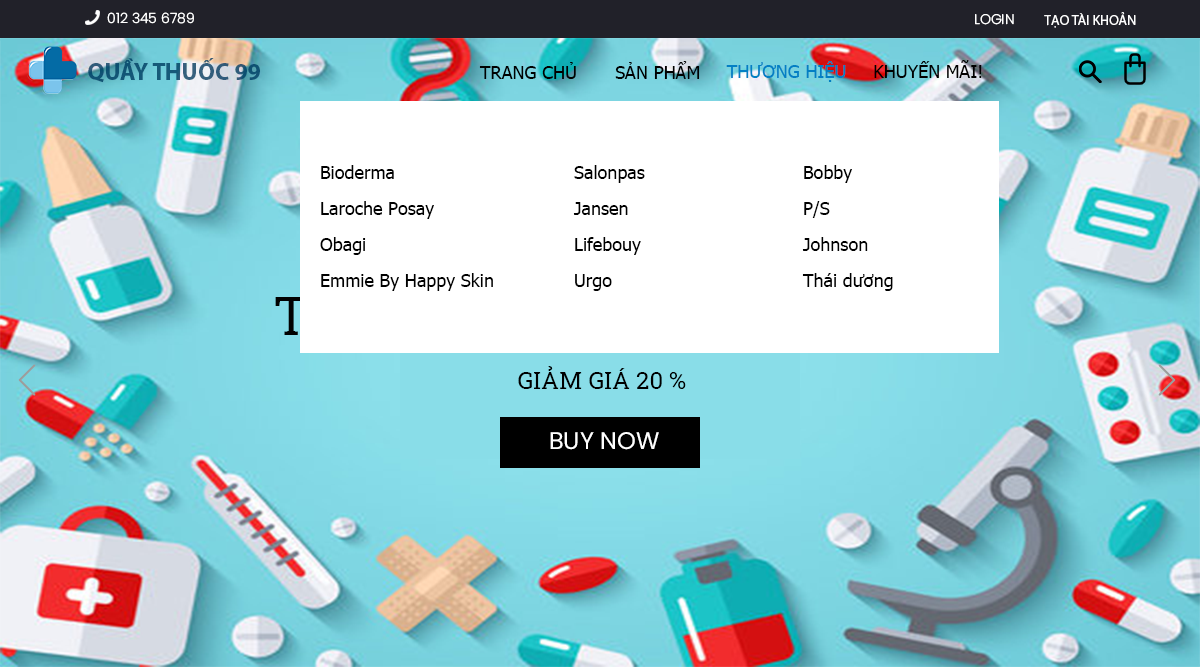
<style>
.page{position:relative;width:1200px;height:667px;background:#ffffff}
.page>*{position:absolute;margin:0}
.t1{font:14px "Poppins-Light";color:#ffffff}
.t2{font:14px "MyriadPro-Regular";color:#ffffff}
.t3{font:24px "MyriadPro-Bold"}
.t4{font:18px "Tahoma";color:#000000}
.t5{font:18px "Tahoma";color:#037fc4}
.t6{font:18px/36px "Tahoma";color:#000000}
.t7{font:18px/36px "RobotoSlab-Regular";color:#000000;font-weight:bold}
.t8{font:24px "RobotoSlab-Regular";color:#000000}
</style>
<div class="page">
<p class="t1" style="left:107px;top:12px;width:87px;height:12px">012 345 6789</p>
<p class="t1" style="left:975px;top:14px;width:39px;height:11px">LOGIN</p>
<p class="t2" style="left:1044px;top:12px;width:92px;height:16px"><span class="t1">T</span>ẠO TÀI KHOẢN</p>
<p class="t3" style="left:88px;top:58px;width:172px;height:25px">QUẦY THUỐC 99</p>
<p class="t4" style="left:479px;top:62px;width:97px;height:17px">TRANG CHỦ</p>
<p class="t4" style="left:615px;top:61px;width:85px;height:18px">SẢN PHẨM</p>
<p class="t5" style="left:726px;top:61px;width:120px;height:21px">THƯƠNG HIỆU</p>
<p class="t4" style="left:874px;top:60px;width:108px;height:18px">KHUYẾN MÃI!</p>
<p class="t6" style="left:320px;top:165px;width:173px;height:126px"><span class="t7"><br></span>Bioderma<br>Laroche Posay<br>Obagi<br>Emmie By Happy Skin</p>
<p class="t6" style="left:573px;top:165px;width:72px;height:126px"><span class="t7"><br></span>Salonpas<br>Jansen<br>Lifebouy <br>Urgo</p>
<p class="t6" style="left:802px;top:165px;width:91px;height:126px"><span class="t7"><br></span>Bobby<br>P/S<br>Johnson<br>Thái dương</p>
<p class="t8" style="left:518px;top:366px;width:168px;height:23px">GIẢM GIÁ 20 %</p>
</div>
